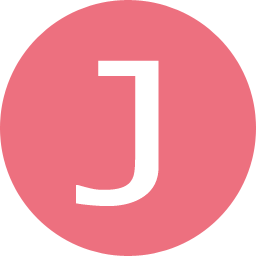
<style>
.page{position:relative;width:256px;height:256px;background:#ed707f}
.page>*{position:absolute;margin:0}
.t1{font:197.1px "Tahoma";color:#ffffff;scale:1.22 1}
</style>
<div class="page">
<p class="t1" style="left:76px;top:60px;width:83px;height:146px">J</p>
</div>
